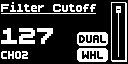
<style>
.page{position:relative;width:128px;height:64px;background:#000000}
.page>*{position:absolute;margin:0}
.t1{font:16px "BoldPixels";color:#ffffff}
.t2{font:32px "BoldPixels";color:#ffffff}
.t3{font:14px "EditUndoBRK";color:#000000}
.t4{font:14px "EditUndoBRK";color:#ffffff}
</style>
<div class="page">
<p class="t1" style="left:1px;top:2px;width:95px;height:10px">Filter Cutoff</p>
<p class="t2" style="left:1px;top:28px;width:52px;height:16px">127</p>
<p class="t3" style="left:79px;top:34px;width:28px;height:9px">Dual</p>
<p class="t4" style="left:1px;top:50px;width:28px;height:9px">Ch02</p>
<p class="t3" style="left:82px;top:50px;width:22px;height:9px">WHL</p>
</div>
